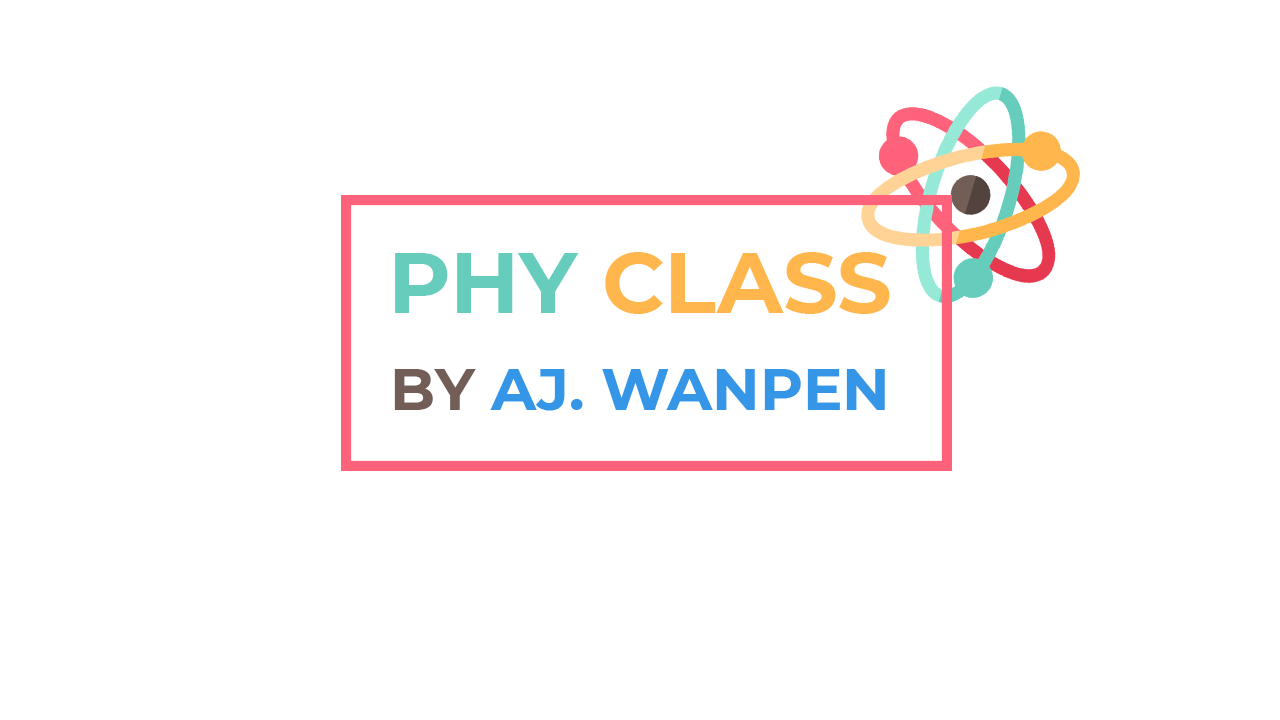
<style>
.page{position:relative;width:1280px;height:720px;background:#ffffff}
.page>*{position:absolute;margin:0}
.t1{font:20.6px "Montserrat-Bold";color:#ffb64c}
.t2{font:20.6px "Montserrat-Bold";color:#66ccbb}
.t3{font:14.2px "Montserrat-Bold";color:#3595e6}
.t4{font:14.2px "Montserrat-Bold";color:#725d57}
</style>
<div class="page">
<p class="t1" style="left:395px;top:252px;width:495px;height:62px"><span class="t2">PHY </span>CLASS</p>
<p class="t3" style="left:394px;top:369px;width:491px;height:42px"><span class="t4">BY </span>AJ. WANPEN</p>
</div>
